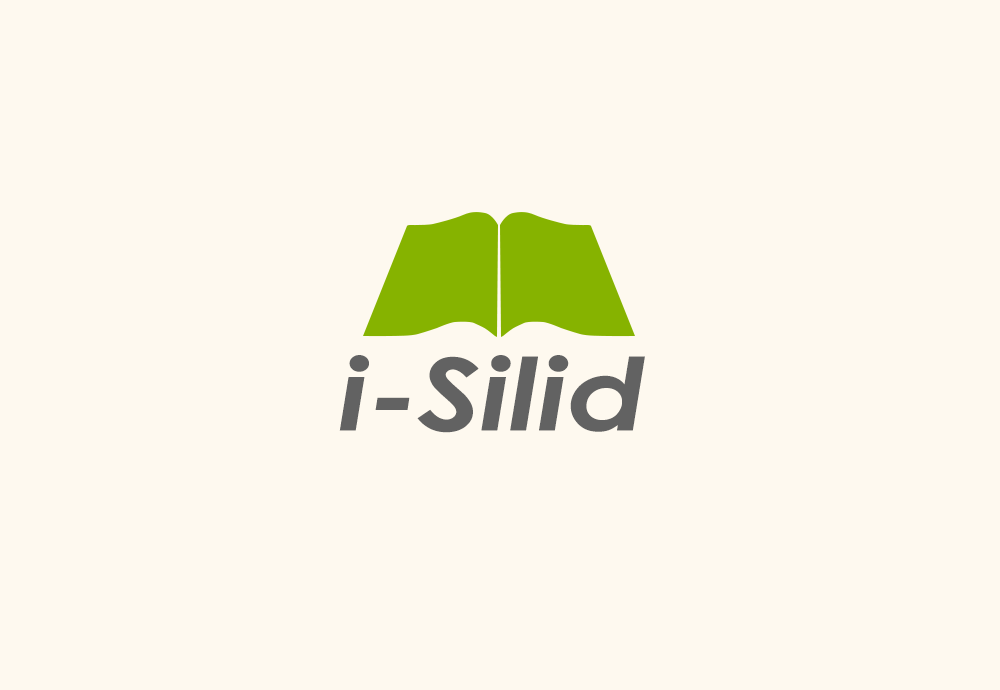
<style>
.page{position:relative;width:1000px;height:690px;background:#fef9ef}
.page>*{position:absolute;margin:0}
.t1{font:100px "CenturyGothic-BoldItalic";color:#626262;scale:1.2 1}
</style>
<div class="page">
<p class="t1" style="left:339px;top:355px;width:306px;height:78px">i-Silid</p>
</div>
